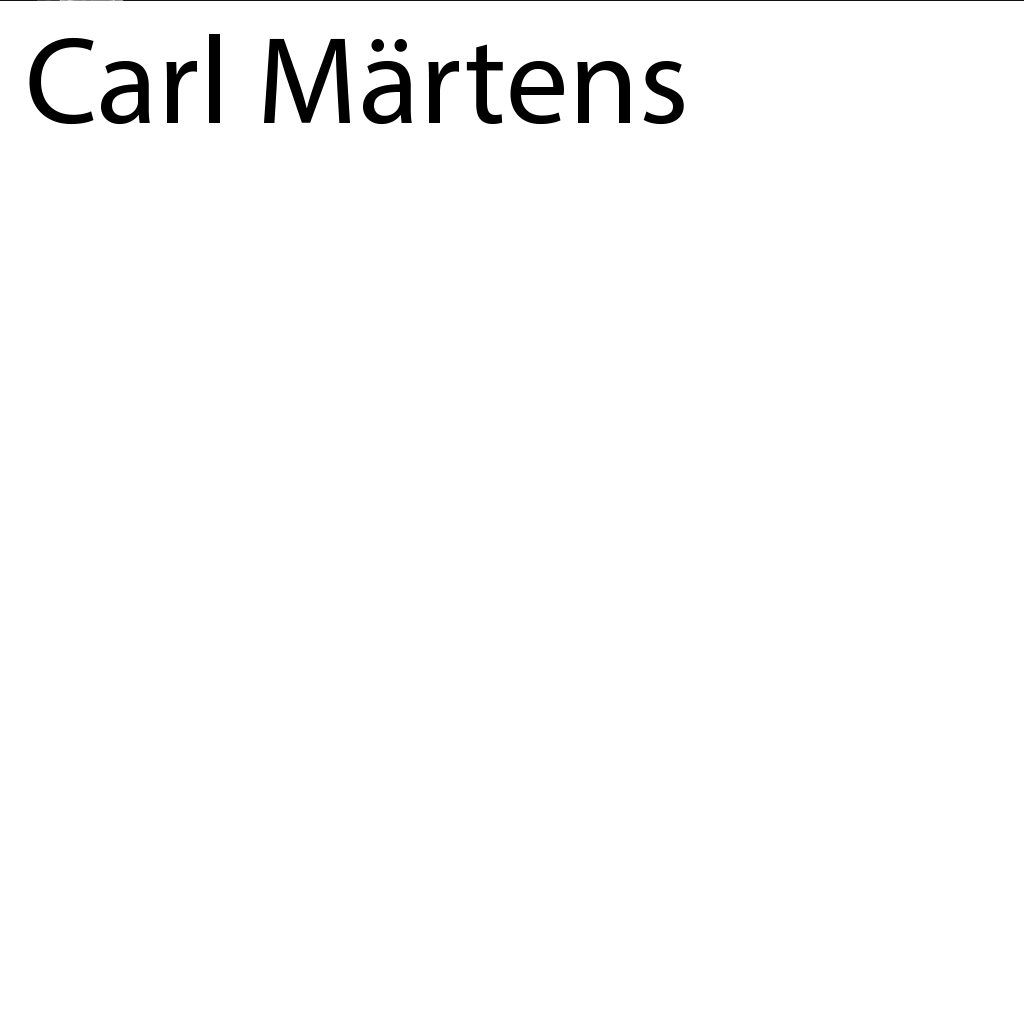
<style>
.page{position:relative;width:1024px;height:1024px;background:#ffffff}
.page>*{position:absolute;margin:0}
.t1{font:125px "MyriadPro-Regular";letter-spacing:0.005em;color:#000000}
</style>
<div class="page">
<p class="t1" style="left:29px;top:33px;width:655px;height:91px">Carl Märtens</p>
</div>
